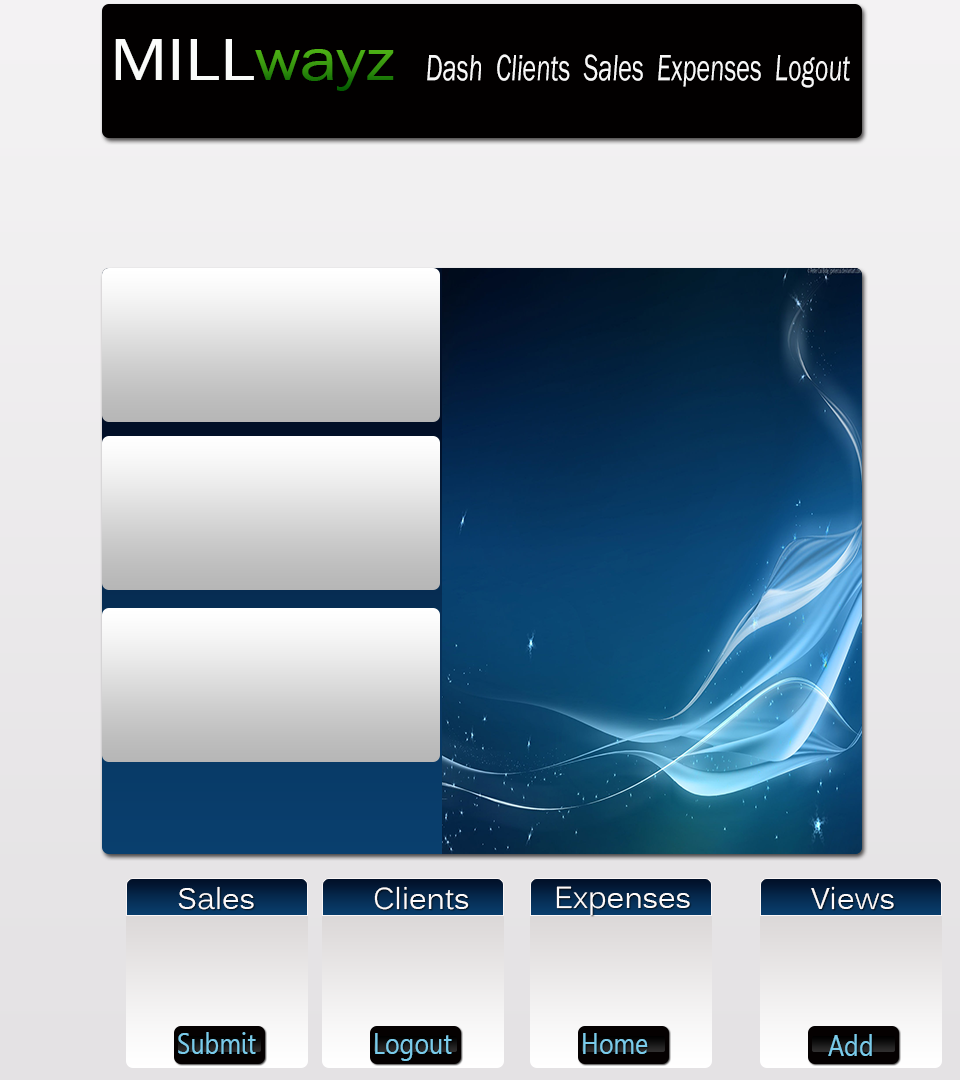
<style>
.page{position:relative;width:960px;height:1080px}
.page>*{position:absolute;margin:0}
.t1{font:60.9px "FranklinGothic-Book";color:#fbfcfb;scale:1.16 1}
.t2{font:60.9px "FranklinGothic-Book";color:#49ab14;scale:1.16 1}
.t3{font:37.9px "FranklinGothic-BookItalic";color:#f8f8f8;scale:0.69 1}
.t4{font:30px "Kalinga";color:#fefbfb}
.t5{font:28.9px "Leelawadee";color:#7acbea;scale:0.87 1}
</style>
<div class="page">
<p class="t1" style="left:115px;top:39px;width:279px;height:52px">MILL<span class="t2">wayz</span></p>
<p class="t3" style="left:427px;top:54px;width:423px;height:34px">Dash  Clients  Sales  Expenses  Logout</p>
<p class="t4" style="left:178px;top:886px;width:76px;height:24px">Sales</p>
<p class="t4" style="left:374px;top:886px;width:95px;height:24px">Clients</p>
<p class="t4" style="left:556px;top:886px;width:134px;height:30px">Expenses</p>
<p class="t4" style="left:811px;top:886px;width:83px;height:24px">Views</p>
<p class="t5" style="left:178px;top:1032px;width:78px;height:22px">Submit</p>
<p class="t5" style="left:375px;top:1033px;width:77px;height:28px">Logout</p>
<p class="t5" style="left:583px;top:1033px;width:65px;height:21px">Home</p>
<p class="t5" style="left:828px;top:1034px;width:44px;height:22px">Add</p>
</div>
